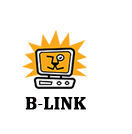
<style>
.page{position:relative;width:132px;height:134px;background:#ffffff}
.page>*{position:absolute;margin:0}
.t1{font:18px "Cambria-Bold";color:#030303;font-weight:bold}
.t2{font:18px "Cambria-Bold";color:#090505;font-weight:bold}
.t3{font:18px "Cambria";color:#030303}
</style>
<div class="page">
<p class="t1" style="left:25px;top:97px;width:61px;height:13px"><span class="t2">B</span><span class="t3">-</span>LINK</p>
</div>
